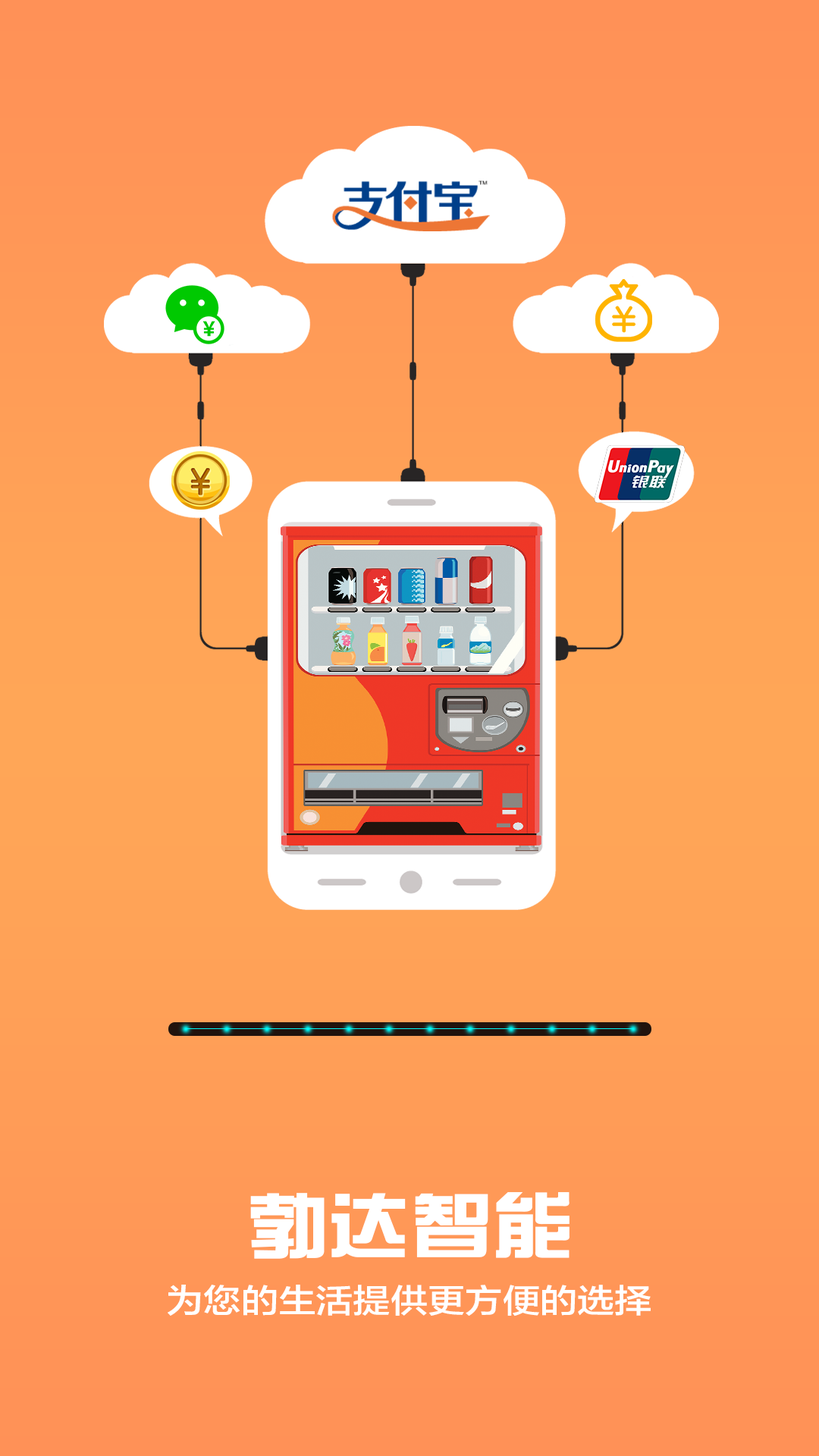
<style>
.page{position:relative;width:819px;height:1456px}
.page>*{position:absolute;margin:0}
.t1{font:72.3px "BDZYJT--GB1-0";color:#ffffff;scale:1.13 1}
.t2{font:33px "FZLTZHK--GBK1-0";color:#ffffff;scale:1.13 1}
</style>
<div class="page">
<p class="t1" style="left:250px;top:1192px;width:320px;height:67px">勃达智能</p>
<p class="t2" style="left:168px;top:1285px;width:483px;height:31px">为您的生活提供更方便的选择</p>
</div>
